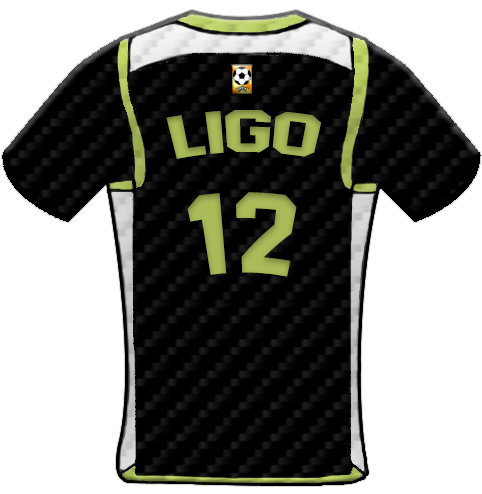
<style>
.page{position:relative;width:482px;height:494px;background:#ffffff}
.page>*{position:absolute;margin:0}
.t1{font:59.4px "AdidasHalfBlock2016";color:#a9bc59;scale:1.13 1}
.t2{font:113.8px "AdidasHalfBlock2016";color:#a9bc59}
</style>
<div class="page">
<p class="t1" style="left:166px;top:110px;width:156px;height:49px">Ligo</p>
<p class="t2" style="left:187px;top:192px;width:110px;height:85px">12</p>
</div>
